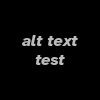
<style>
.page{position:relative;width:100px;height:100px;background:#000000}
.page>*{position:absolute;margin:0}
.t1{font:16px "AtkinsonHyperlegible-BoldItalic";color:#bcbcbc}
</style>
<div class="page">
<p class="t1" style="left:22px;top:35px;width:56px;height:30px;text-align:center">alt text<br>test</p>
</div>
